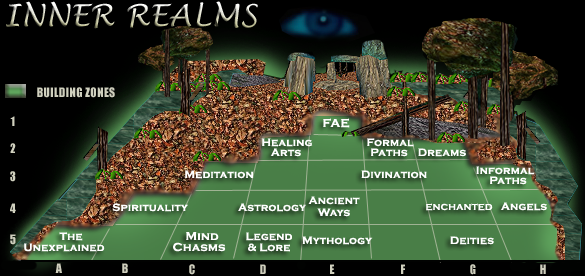
<style>
.page{position:relative;width:585px;height:276px;background:#000000}
.page>*{position:absolute;margin:0}
.t1{font:30px "LucidaHandwriting-Italic";letter-spacing:0.02em}
.t2{font:12px "Impact";letter-spacing:0.02em;color:#d0d0be}
.t3{font:12px "CopperplateGothic-Bold";letter-spacing:0.02em;color:#ffffff}
.t4{font:11px "CopperplateGothic-Bold";letter-spacing:0.02em;color:#ffffff}
.t5{font:9px "CopperplateGothic-Bold";letter-spacing:0.02em;color:#ffffff}
</style>
<div class="page">
<p class="t1" style="left:6px;top:1px;width:252px;height:28px">INNER REALMS</p>
<p class="t2" style="left:37px;top:87px;width:78px;height:11px">BUILDING ZONES</p>
<p class="t2" style="left:10px;top:116px;width:5px;height:10px">1</p>
<p class="t3" style="left:323px;top:118px;width:27px;height:10px">FAE</p>
<p class="t2" style="left:10px;top:143px;width:6px;height:10px">2</p>
<p class="t4" style="left:262px;top:138px;width:51px;height:9px">Healing</p>
<p class="t4" style="left:270px;top:148px;width:31px;height:9px">Arts</p>
<p class="t4" style="left:367px;top:138px;width:47px;height:9px">Formal</p>
<p class="t4" style="left:371px;top:148px;width:37px;height:9px">Paths</p>
<p class="t4" style="left:418px;top:148px;width:48px;height:9px">Dreams</p>
<p class="t2" style="left:10px;top:171px;width:6px;height:11px">3</p>
<p class="t4" style="left:185px;top:170px;width:69px;height:9px">Meditation</p>
<p class="t4" style="left:361px;top:170px;width:66px;height:9px">Divination</p>
<p class="t4" style="left:476px;top:166px;width:59px;height:9px">Informal</p>
<p class="t4" style="left:490px;top:176px;width:37px;height:9px">Paths</p>
<p class="t4" style="left:308px;top:196px;width:52px;height:9px">Ancient</p>
<p class="t2" style="left:10px;top:203px;width:6px;height:10px">4</p>
<p class="t4" style="left:112px;top:203px;width:76px;height:9px">Spirituality</p>
<p class="t4" style="left:238px;top:203px;width:68px;height:9px">Astrology</p>
<p class="t4" style="left:317px;top:208px;width:33px;height:9px">Ways</p>
<p class="t5" style="left:426px;top:203px;width:67px;height:8px">ENCHANTED</p>
<p class="t4" style="left:500px;top:202px;width:47px;height:9px">Angels</p>
<p class="t4" style="left:59px;top:232px;width:24px;height:9px">The</p>
<p class="t3" style="left:186px;top:232px;width:33px;height:8px">Mind</p>
<p class="t4" style="left:246px;top:232px;width:46px;height:9px">Legend</p>
<p class="t2" style="left:10px;top:234px;width:6px;height:11px">5</p>
<p class="t4" style="left:24px;top:243px;width:81px;height:9px">Unexplained</p>
<p class="t3" style="left:173px;top:242px;width:53px;height:10px">Chasms</p>
<p class="t4" style="left:248px;top:243px;width:42px;height:9px">&amp; Lore</p>
<p class="t4" style="left:302px;top:236px;width:71px;height:9px">Mythology</p>
<p class="t4" style="left:450px;top:236px;width:44px;height:9px">Deities</p>
<p class="t2" style="left:55px;top:263px;width:7px;height:10px">A</p>
<p class="t2" style="left:122px;top:263px;width:6px;height:10px">B</p>
<p class="t2" style="left:189px;top:264px;width:6px;height:11px">C</p>
<p class="t2" style="left:260px;top:264px;width:6px;height:10px">D</p>
<p class="t2" style="left:330px;top:264px;width:5px;height:10px">E</p>
<p class="t2" style="left:401px;top:264px;width:4px;height:10px">F</p>
<p class="t2" style="left:470px;top:264px;width:6px;height:11px">G</p>
<p class="t2" style="left:540px;top:264px;width:6px;height:10px">H</p>
</div>
